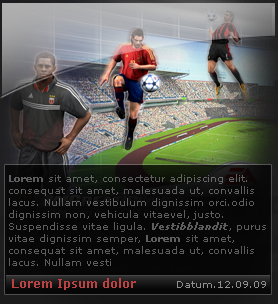
<style>
.page{position:relative;width:278px;height:304px}
.page>*{position:absolute;margin:0}
.t1{font:10px "Verdana";color:#5e5e5e}
.t2{font:11px "Verdana-Bold";color:#5e5e5e}
.t3{font:10px "Verdana-Bold";color:#5e5e5e}
.t4{font:10px "Verdana-BoldItalic";color:#5e5e5e}
.t5{font:12px "Verdana-Bold";color:#bb4242}
.t6{font:10px "Verdana";color:#909090}
</style>
<div class="page">
<p class="t1" style="left:9px;top:174px;width:257px;height:92px"><span class="t2"><br></span><span class="t3"><br>Lorem</span> sit amet, consectetur adipiscing elit. <br>consequat sit amet, malesuada ut, convallis <br>lacus. Nullam vestibulum dignissim orci.odio <br>dignissim non, vehicula vitaevel, justo. <br>Suspendisse vitae ligula. <span class="t4">Vestibblandit</span>, purus <br>vitae dignissim semper, <span class="t3">Lorem</span> sit amet, <br>consequat sit amet, malesuada ut, convallis <br>lacus. Nullam vesti</p>
<p class="t5" style="left:12px;top:278px;width:254px;height:12px">Lorem Ipsum dolor          <span class="t6">Datum.12.09.09</span></p>
</div>
